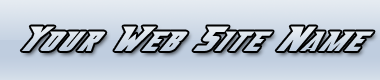
<style>
.page{position:relative;width:380px;height:80px}
.page>*{position:absolute;margin:0}
.t1{font:41px "Abberancy";color:#bfcddf}
</style>
<div class="page">
<p class="t1" style="left:21px;top:26px;width:353px;height:25px">Your Web Site Name</p>
</div>
